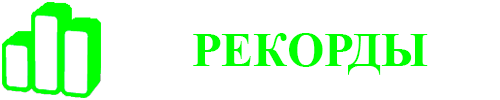
<style>
.page{position:relative;width:500px;height:100px;background:#ffffff}
.page>*{position:absolute;margin:0}
.t1{font:48px "TimesNewRomanPS-BoldMT";color:#00ff00}
</style>
<div class="page">
<p class="t1" style="left:193px;top:33px;width:235px;height:42px">РЕКОРДЫ</p>
</div>
